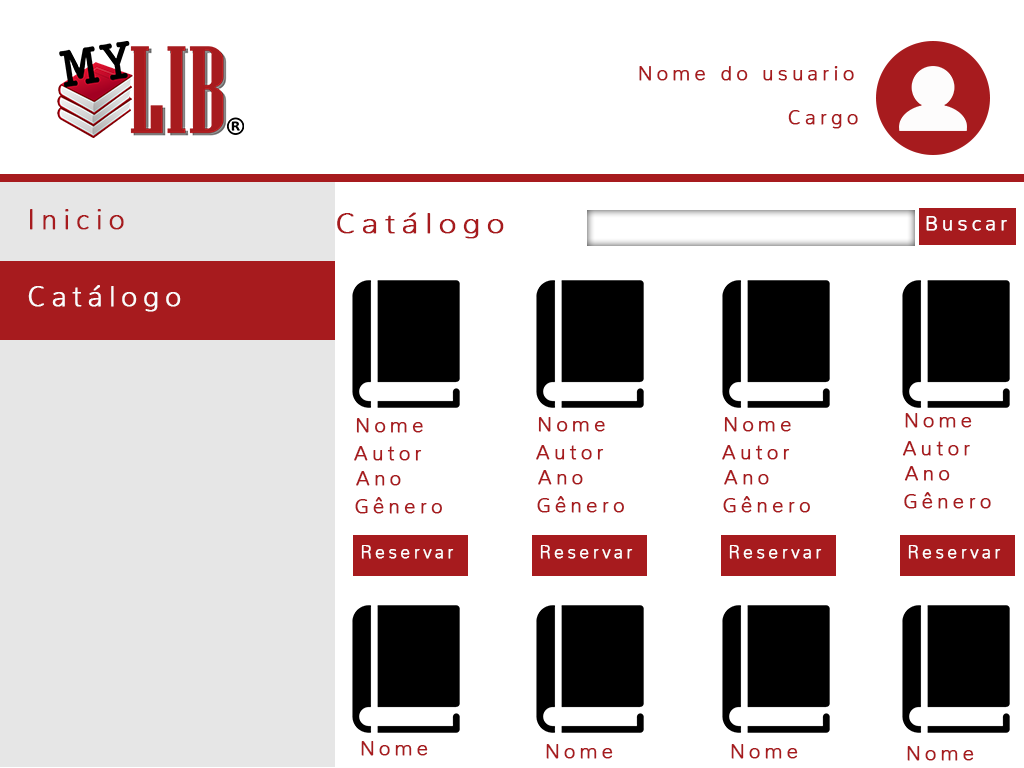
<style>
.page{position:relative;width:1024px;height:768px;background:#ffffff}
.page>*{position:absolute;margin:0}
.t1{font:20px "Nunito-ExtraLight";letter-spacing:0.2em;color:#a71b1e;font-weight:bold}
.t2{font:28px "Nunito-ExtraLight";letter-spacing:0.2em;color:#a71b1e;font-weight:bold}
.t3{font:29.3px "Nunito-ExtraLight";letter-spacing:0.2em;color:#a71b1e;font-weight:bold;scale:1.05 1}
.t4{font:20px "Nunito-ExtraLight";letter-spacing:0.2em;color:#fefdfd;font-weight:bold}
.t5{font:28px "Nunito-ExtraLight";letter-spacing:0.2em;color:#fbfbfb;font-weight:bold}
.t6{font:20.1px "Nunito-ExtraLight";letter-spacing:0.2em;color:#a71b1e;font-weight:bold}
.t7{font:16.8px "Nunito-ExtraLight";letter-spacing:0.2em;color:#fefefe;font-weight:bold}
</style>
<div class="page">
<p class="t1" style="left:639px;top:66px;width:215px;height:15px">Nome do usuario</p>
<p class="t1" style="left:788px;top:110px;width:70px;height:19px">Cargo</p>
<p class="t2" style="left:30px;top:209px;width:94px;height:21px">Inicio</p>
<p class="t3" style="left:337px;top:212px;width:167px;height:27px">Catálogo</p>
<p class="t4" style="left:926px;top:216px;width:81px;height:15px">Buscar</p>
<p class="t5" style="left:28px;top:285px;width:153px;height:27px">Catálogo</p>
<p class="t6" style="left:905px;top:413px;width:67px;height:15px">Nome</p>
<p class="t1" style="left:356px;top:418px;width:67px;height:15px">Nome</p>
<p class="t1" style="left:538px;top:417px;width:67px;height:15px">Nome</p>
<p class="t1" style="left:724px;top:417px;width:67px;height:15px">Nome</p>
<p class="t1" style="left:354px;top:446px;width:68px;height:15px">Autor</p>
<p class="t1" style="left:536px;top:445px;width:68px;height:15px">Autor</p>
<p class="t1" style="left:722px;top:445px;width:68px;height:15px">Autor</p>
<p class="t6" style="left:902px;top:441px;width:68px;height:15px">Autor</p>
<p class="t1" style="left:356px;top:471px;width:45px;height:15px">Ano</p>
<p class="t1" style="left:538px;top:470px;width:45px;height:15px">Ano</p>
<p class="t1" style="left:724px;top:470px;width:45px;height:15px">Ano</p>
<p class="t6" style="left:904px;top:466px;width:46px;height:15px">Ano</p>
<p class="t1" style="left:355px;top:497px;width:87px;height:17px">Gênero</p>
<p class="t1" style="left:537px;top:496px;width:87px;height:17px">Gênero</p>
<p class="t1" style="left:723px;top:496px;width:87px;height:17px">Gênero</p>
<p class="t6" style="left:904px;top:492px;width:87px;height:17px">Gênero</p>
<p class="t7" style="left:361px;top:545px;width:93px;height:14px">Reservar</p>
<p class="t7" style="left:540px;top:545px;width:93px;height:14px">Reservar</p>
<p class="t7" style="left:729px;top:545px;width:93px;height:14px">Reservar</p>
<p class="t7" style="left:908px;top:545px;width:93px;height:14px">Reservar</p>
<p class="t6" style="left:361px;top:741px;width:67px;height:15px">Nome</p>
<p class="t6" style="left:546px;top:744px;width:67px;height:15px">Nome</p>
<p class="t6" style="left:731px;top:744px;width:67px;height:15px">Nome</p>
<p class="t6" style="left:907px;top:746px;width:67px;height:15px">Nome</p>
</div>
